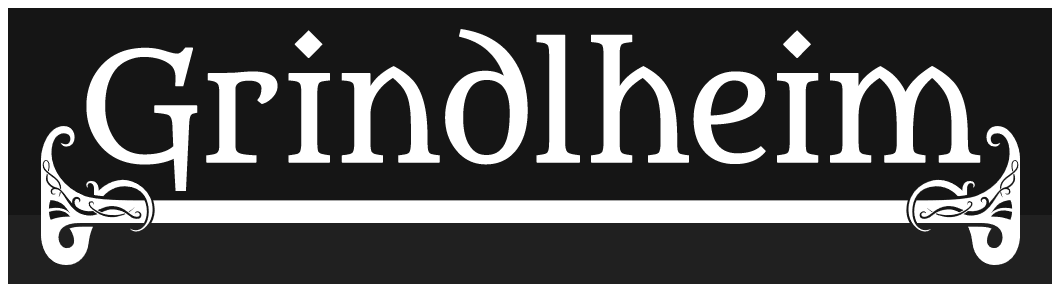
<style>
.page{position:relative;width:1060px;height:292px;background:#151515}
.page>*{position:absolute;margin:0}
.t1{font:150px "Metamorphous";letter-spacing:-0.025em;color:#ffffff;font-weight:bold}
</style>
<div class="page">
<p class="t1" style="left:86px;top:29px;width:895px;height:162px">Grindlheim</p>
</div>
